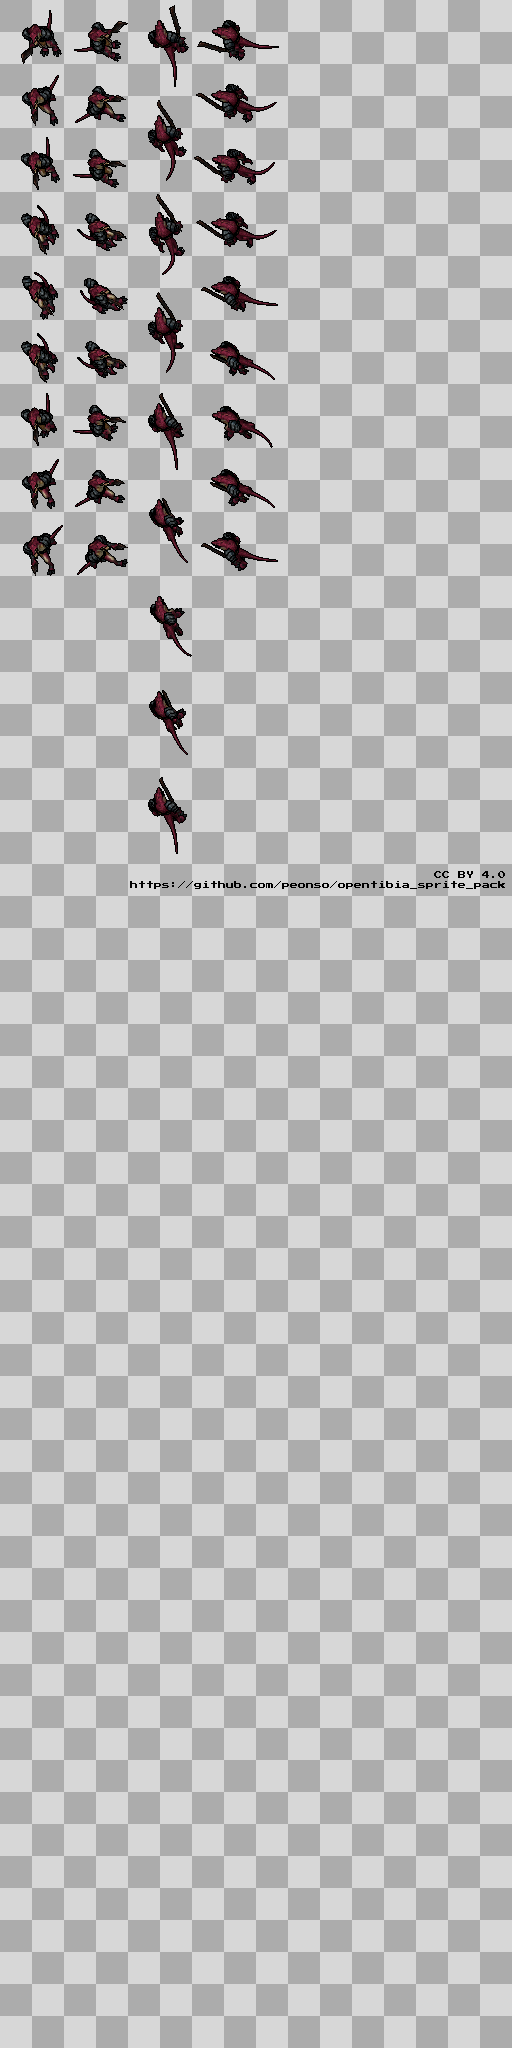
<style>
.page{position:relative;width:512px;height:2048px;background:#d7d7d7}
.page>*{position:absolute;margin:0}
.t1{font:8px "PressStart2P";color:#000000}
</style>
<div class="page">
<p class="t1" style="left:130px;top:871px;width:375px;height:18px;text-align:right">CC BY 4.0<br>https://github.com/peonso/opentibia_sprite_pack</p>
</div>
